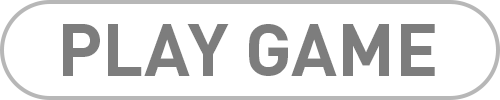
<style>
.page{position:relative;width:500px;height:100px;background:#ffffff}
.page>*{position:absolute;margin:0}
.t1{font:72px "DINPro-Bold";color:#7d7d7d}
</style>
<div class="page">
<p class="t1" style="left:63px;top:24px;width:372px;height:52px">PLAY GAME</p>
</div>
